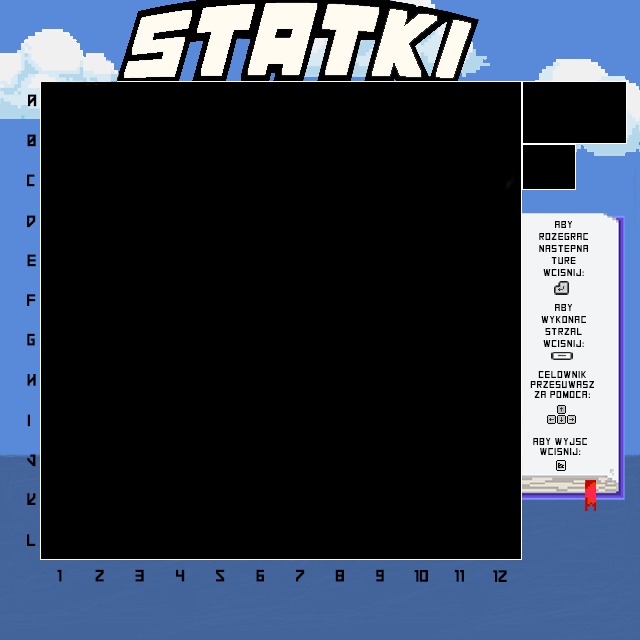
<style>
.page{position:relative;width:640px;height:640px;background:#000000}
.page>*{position:absolute;margin:0}
.t1{font:12px "SquareRaising";letter-spacing:0.05em;color:#000000;text-transform:uppercase}
.t2{font:10px "SquareFont";letter-spacing:0.05em;color:#000000;text-transform:uppercase}
</style>
<div class="page">
<p class="t1" style="left:28px;top:94px;width:9px;height:13px">A</p>
<p class="t1" style="left:27px;top:134px;width:9px;height:13px">B</p>
<p class="t1" style="left:27px;top:174px;width:8px;height:13px">C</p>
<p class="t1" style="left:27px;top:215px;width:9px;height:13px">D</p>
<p class="t2" style="left:539px;top:221px;width:49px;height:55px;text-align:center">Aby rozegrac nastepna ture Wcisnij:</p>
<p class="t1" style="left:27px;top:254px;width:9px;height:13px">E</p>
<p class="t1" style="left:27px;top:294px;width:9px;height:12px">F</p>
<p class="t2" style="left:541px;top:304px;width:45px;height:43px;text-align:center">aby wykonac strzal wcisnij:</p>
<p class="t1" style="left:27px;top:333px;width:8px;height:13px">G</p>
<p class="t1" style="left:27px;top:374px;width:9px;height:12px">H</p>
<p class="t2" style="left:530px;top:371px;width:64px;height:27px;text-align:center">celownik<br>przesuwasz<br>za pomoca:</p>
<p class="t1" style="left:27px;top:414px;width:3px;height:13px">I</p>
<p class="t2" style="left:533px;top:438px;width:54px;height:17px;text-align:center">Aby wyjsc<br>wcisnij:</p>
<p class="t1" style="left:27px;top:454px;width:9px;height:13px">J</p>
<p class="t1" style="left:27px;top:493px;width:9px;height:12px">K</p>
<p class="t1" style="left:27px;top:534px;width:9px;height:12px">L</p>
<p class="t1" style="left:57px;top:569px;width:5px;height:13px">1</p>
<p class="t1" style="left:95px;top:569px;width:9px;height:13px">2</p>
<p class="t1" style="left:135px;top:569px;width:9px;height:13px">3</p>
<p class="t1" style="left:176px;top:569px;width:9px;height:13px">4</p>
<p class="t1" style="left:216px;top:569px;width:9px;height:13px">5</p>
<p class="t1" style="left:256px;top:569px;width:8px;height:13px">6</p>
<p class="t1" style="left:296px;top:569px;width:9px;height:13px">7</p>
<p class="t1" style="left:335px;top:569px;width:9px;height:13px">8</p>
<p class="t1" style="left:376px;top:569px;width:8px;height:13px">9</p>
<p class="t1" style="left:414px;top:570px;width:14px;height:12px">10</p>
<p class="t1" style="left:454px;top:570px;width:10px;height:12px">11</p>
<p class="t1" style="left:493px;top:570px;width:14px;height:12px">12</p>
</div>
